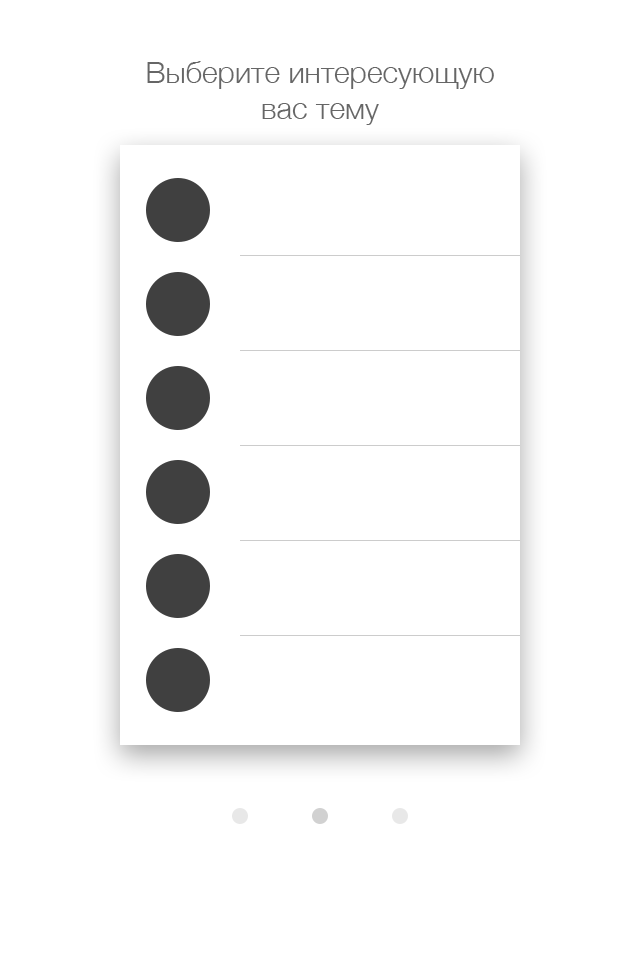
<style>
.page{position:relative;width:640px;height:960px;background:#ffffff}
.page>*{position:absolute;margin:0}
.t1{font:30px "HelveticaNeue-Light";color:#666666}
</style>
<div class="page">
<p class="t1" style="left:147px;top:61px;width:347px;height:64px;text-align:center">Выберите интересующую<br>вас тему</p>
</div>
